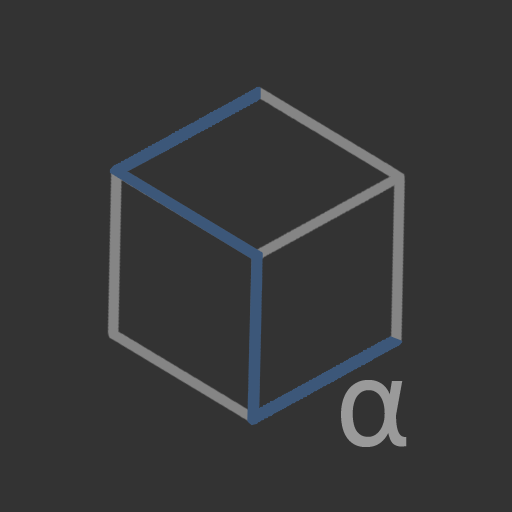
<style>
.page{position:relative;width:512px;height:512px;background:#333333}
.page>*{position:absolute;margin:0}
.t1{font:132.3px "Consolas";color:#9a9a9a}
</style>
<div class="page">
<p class="t1" style="left:341px;top:380px;width:66px;height:67px">α</p>
</div>
